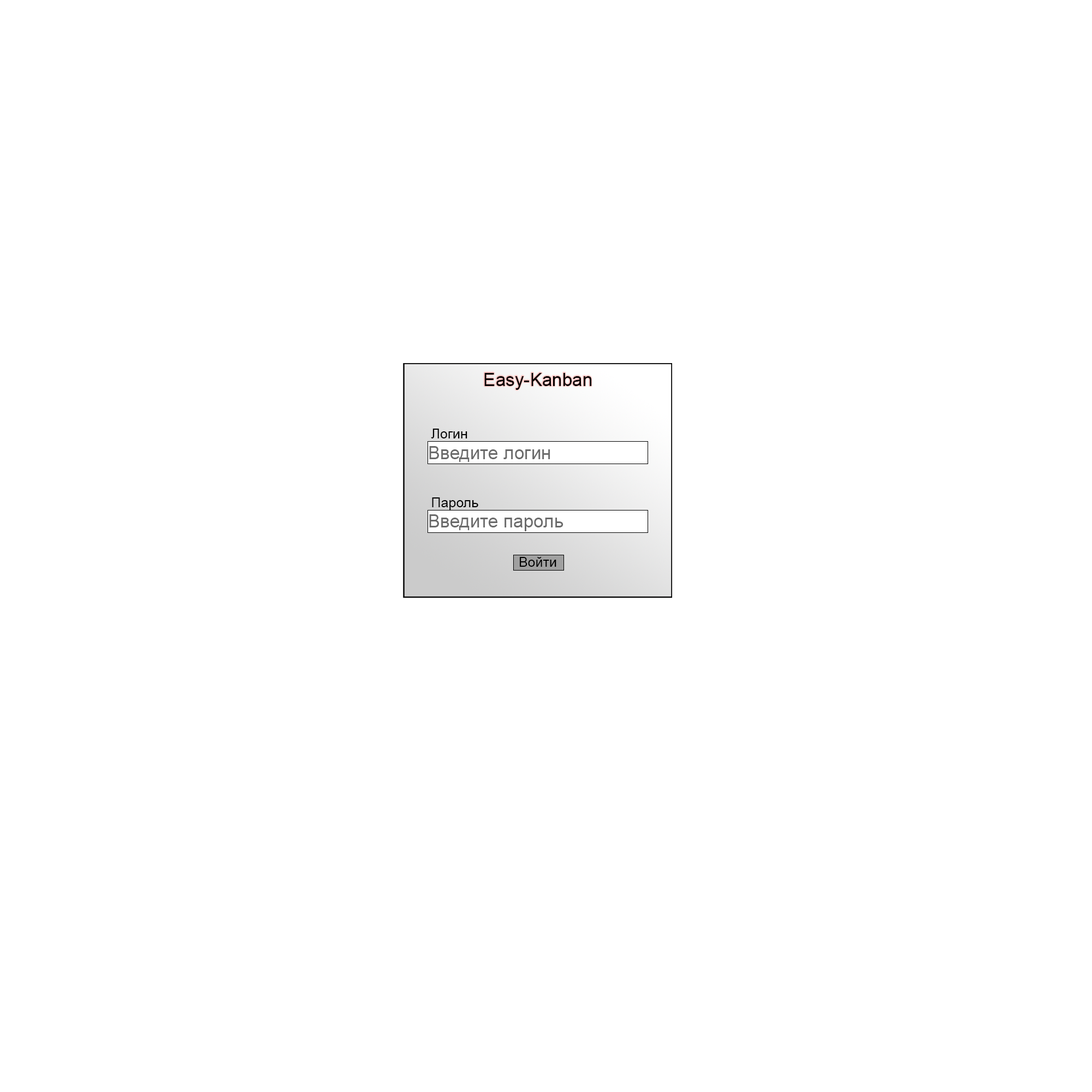
<style>
.page{position:relative;width:1092px;height:1092px;background:#ffffff}
.page>*{position:absolute;margin:0}
.t1{font:18.2px "ArialMT";color:#000000}
.t2{font:13.6px "ArialMT";color:#000000}
.t3{font:18.2px "ArialMT";color:#6a6a6a}
</style>
<div class="page">
<p class="t1" style="left:484px;top:373px;width:108px;height:17px">Easy-Kanban</p>
<p class="t2" style="left:431px;top:429px;width:36px;height:9px">Логин</p>
<p class="t3" style="left:429px;top:446px;width:121px;height:16px">Введите логин</p>
<p class="t2" style="left:432px;top:497px;width:46px;height:13px">Пароль</p>
<p class="t3" style="left:429px;top:514px;width:134px;height:17px">Введите пароль</p>
<p class="t2" style="left:520px;top:557px;width:36px;height:10px">Войти</p>
</div>
